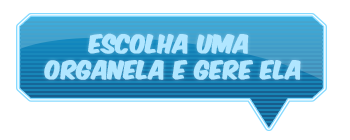
<style>
.page{position:relative;width:350px;height:140px;background:#ffffff}
.page>*{position:absolute;margin:0}
.t1{font:21.6px "KomikaAxis";color:#b0e6ff;font-weight:bold}
</style>
<div class="page">
<p class="t1" style="left:44px;top:33px;width:257px;height:47px;text-align:center">ESCOLHA UMA <br>ORGANELA E GERE ELA</p>
</div>
